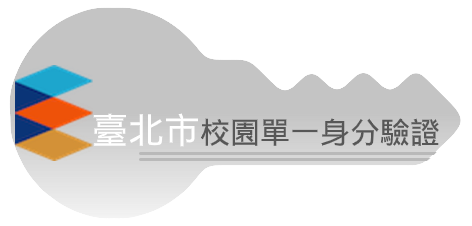
<style>
.page{position:relative;width:472px;height:226px;background:#ffffff}
.page>*{position:absolute;margin:0}
.t1{font:30px "PingFangTC-Medium";color:#575757}
.t2{font:36px "PingFangTC-Medium";color:#ffffff}
</style>
<div class="page">
<p class="t1" style="left:93px;top:113px;width:346px;height:34px"><span class="t2">臺北市</span>校園單一身分驗證</p>
</div>
